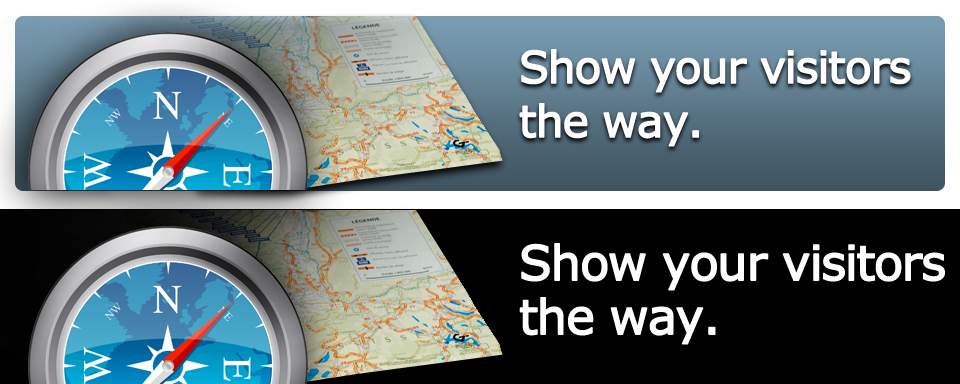
<style>
.page{position:relative;width:960px;height:384px;background:#000000}
.page>*{position:absolute;margin:0}
.t1{font:44px/54px "Verdana";letter-spacing:-0.05em;color:#fefefe;font-weight:bold}
.t2{font:48px/54px "Verdana";letter-spacing:-0.05em;color:#fefefe;font-weight:bold}
</style>
<div class="page">
<p class="t1" style="left:519px;top:49px;width:392px;height:98px">Show your visitors<br>the way.</p>
<p class="t2" style="left:519px;top:243px;width:426px;height:102px">Show your visitors<br>the way.</p>
</div>
